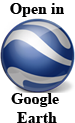
<style>
.page{position:relative;width:75px;height:123px;background:#ffffff}
.page>*{position:absolute;margin:0}
.t1{font:16px "TimesNewRomanPS-BoldMT";color:#000000}
</style>
<div class="page">
<p class="t1" style="left:10px;top:3px;width:54px;height:14px">Open in</p>
<p class="t1" style="left:11px;top:93px;width:48px;height:30px;text-align:center">Google <br>Earth</p>
</div>
